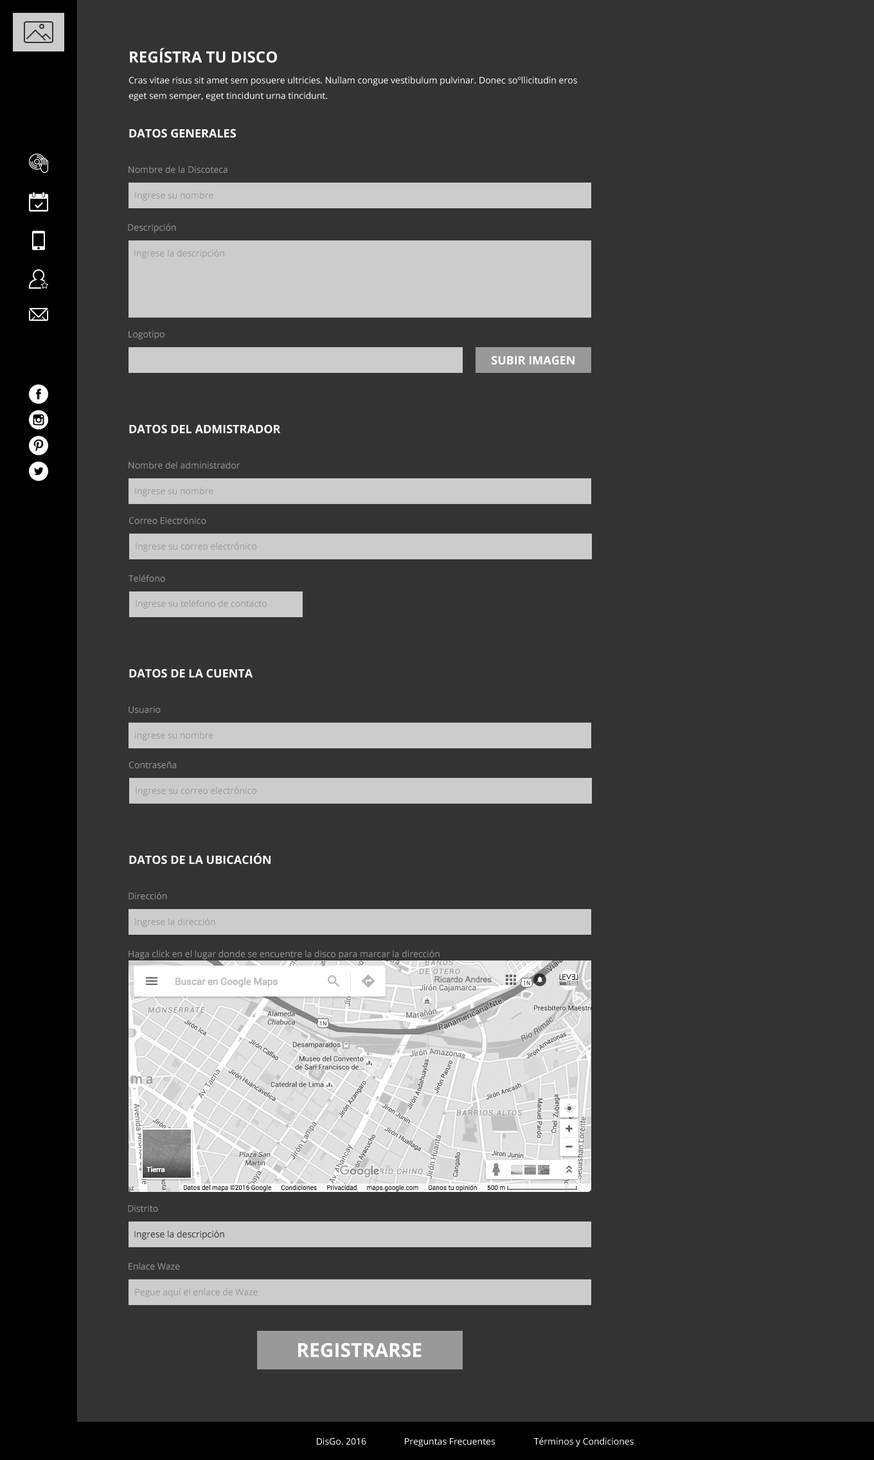
<style>
.page{position:relative;width:874px;height:1460px;background:#333333}
.page>*{position:absolute;margin:0}
.t1{font:15.4px "OpenSans-Bold";color:#ffffff;text-transform:uppercase}
.t2{font:9px/15.4px "OpenSans";color:#ffffff}
.t3{font:11.6px "OpenSans-Bold";color:#ffffff;text-transform:uppercase}
.t4{font:9px "OpenSans";color:#999999}
.t5{font:9px "OpenSans";color:#333333}
.t6{font:19.3px "OpenSans-Bold";color:#ffffff;text-transform:uppercase}
.t7{font:9px "OpenSans";color:#ffffff}
</style>
<div class="page">
<p class="t1" style="left:130px;top:48px;width:147px;height:15px">Regístra tu disco</p>
<p class="t2" style="left:129px;top:76px;width:448px;height:25px">Cras vitae risus sit amet sem posuere ultricies. Nullam congue vestibulum pulvinar. Donec soºllicitudin eros eget sem semper, eget tincidunt urna tincidunt.</p>
<p class="t3" style="left:129px;top:129px;width:107px;height:9px">Datos Generales</p>
<p class="t4" style="left:129px;top:166px;width:99px;height:7px">Nombre de la Discoteca</p>
<p class="t4" style="left:135px;top:192px;width:78px;height:9px">Ingrese su nombre</p>
<p class="t4" style="left:128px;top:224px;width:48px;height:9px">Descripción</p>
<p class="t4" style="left:134px;top:249px;width:90px;height:9px">Ingrese la descripción</p>
<p class="t4" style="left:129px;top:330px;width:36px;height:9px">Logotipo</p>
<p class="t3" style="left:492px;top:356px;width:83px;height:8px">Subir Imagen</p>
<p class="t3" style="left:129px;top:424px;width:152px;height:9px">Datos del Admistrador</p>
<p class="t4" style="left:129px;top:462px;width:111px;height:7px">Nombre del administrador</p>
<p class="t4" style="left:135px;top:487px;width:78px;height:9px">Ingrese su nombre</p>
<p class="t4" style="left:129px;top:517px;width:77px;height:7px">Correo Electrónico</p>
<p class="t4" style="left:136px;top:543px;width:120px;height:9px">Ingrese su correo electrónico</p>
<p class="t4" style="left:129px;top:575px;width:36px;height:7px">Teléfono</p>
<p class="t4" style="left:136px;top:600px;width:131px;height:9px">Ingrese su teléfono de contacto</p>
<p class="t3" style="left:129px;top:669px;width:124px;height:9px">Datos de la cuenta</p>
<p class="t4" style="left:129px;top:706px;width:32px;height:7px">Usuario</p>
<p class="t4" style="left:135px;top:732px;width:78px;height:9px">Ingrese su nombre</p>
<p class="t4" style="left:129px;top:761px;width:47px;height:7px">Contraseña</p>
<p class="t4" style="left:136px;top:787px;width:120px;height:9px">Ingrese su correo electrónico</p>
<p class="t3" style="left:129px;top:853px;width:142px;height:11px">Datos de la ubicación</p>
<p class="t4" style="left:129px;top:892px;width:38px;height:7px">Dirección</p>
<p class="t4" style="left:135px;top:918px;width:80px;height:9px">Ingrese la dirección</p>
<p class="t4" style="left:129px;top:950px;width:311px;height:9px">Haga click en el lugar donde se encuentre la disco para marcar la dirección</p>
<p class="t4" style="left:128px;top:1205px;width:30px;height:7px">Distrito</p>
<p class="t5" style="left:134px;top:1230px;width:90px;height:9px">Ingrese la descripción</p>
<p class="t4" style="left:129px;top:1263px;width:51px;height:7px">Enlace Waze</p>
<p class="t4" style="left:135px;top:1288px;width:123px;height:9px">Pegue aquí el enlace de Waze</p>
<p class="t6" style="left:298px;top:1343px;width:124px;height:14px">Registrarse</p>
<p class="t7" style="left:317px;top:1437px;width:49px;height:8px">DisGo. 2016</p>
<p class="t7" style="left:405px;top:1438px;width:90px;height:9px">Preguntas Frecuentes</p>
<p class="t7" style="left:534px;top:1437px;width:100px;height:10px">Términos y Condiciones</p>
</div>
